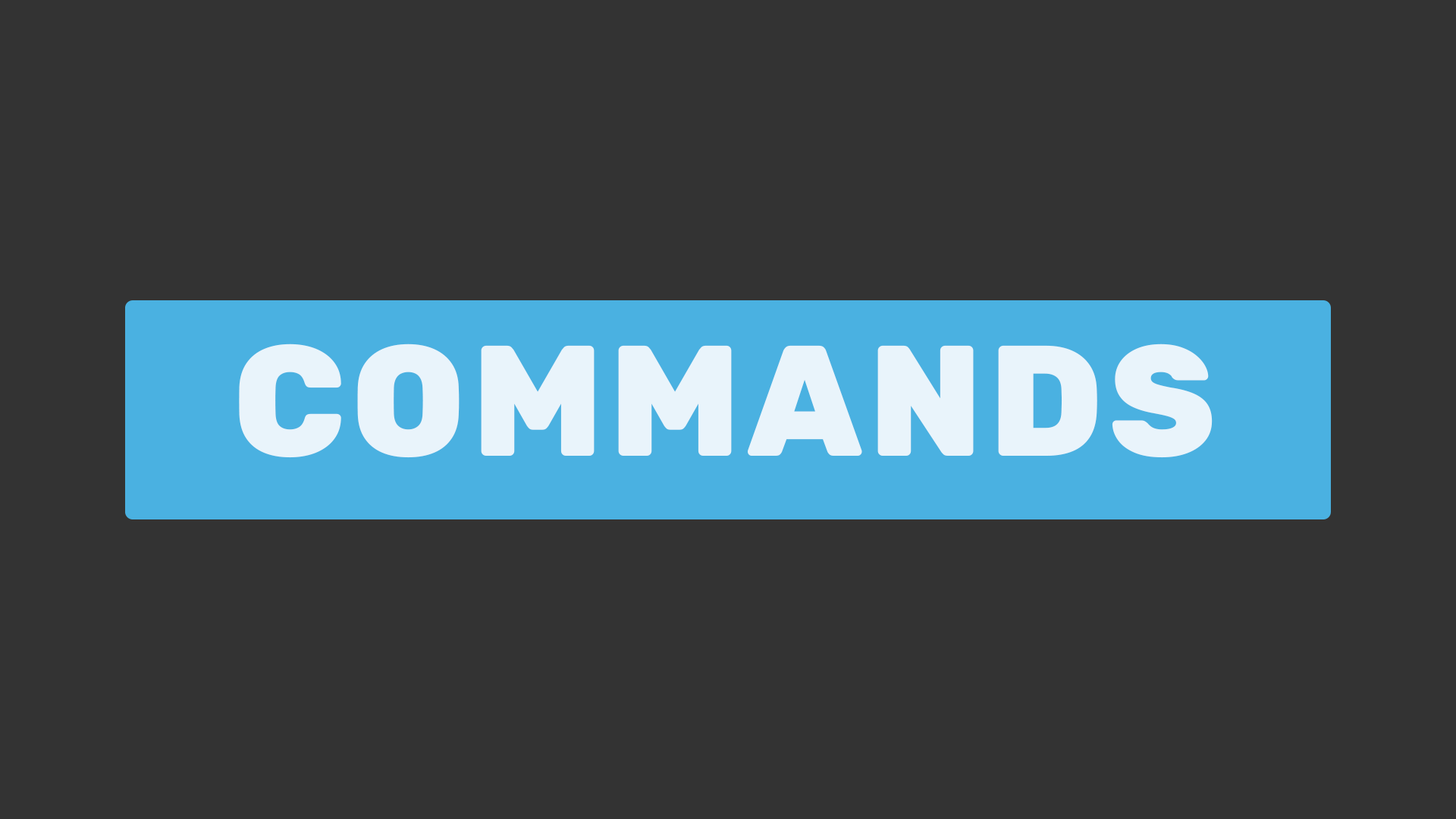
<style>
.page{position:relative;width:1456px;height:819px;background:#333333}
.page>*{position:absolute;margin:0}
.t1{font:155.1px "Rubik-ExtraBold";letter-spacing:0.02em;color:#ffffff;font-weight:bold}
</style>
<div class="page">
<p class="t1" style="left:239px;top:344px;width:974px;height:114px;opacity:0.85">COMMANDS</p>
</div>
